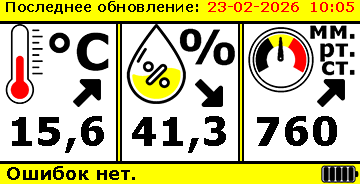
<style>
.page{position:relative;width:360px;height:184px;background:#ffffff}
.page>*{position:absolute;margin:0}
.t1{font:14px "Verdana-Bold";color:#000000}
.t2{font:14px "Verdana-Bold";color:#ff0000}
.t3{font:40px "Verdana-Bold";color:#000000}
.t4{font:18px "Verdana-Bold";color:#000000}
</style>
<div class="page">
<p class="t1" style="left:6px;top:1px;width:192px;height:13px">Последнее обновление:</p>
<p class="t2" style="left:208px;top:2px;width:146px;height:10px">23-02-2026  10:05</p>
<p class="t3" style="left:12px;top:116px;width:92px;height:37px">15,6</p>
<p class="t3" style="left:132px;top:116px;width:94px;height:37px">41,3</p>
<p class="t3" style="left:257px;top:116px;width:80px;height:30px">760</p>
<p class="t4" style="left:7px;top:166px;width:128px;height:14px">Ошибок нет.</p>
</div>
